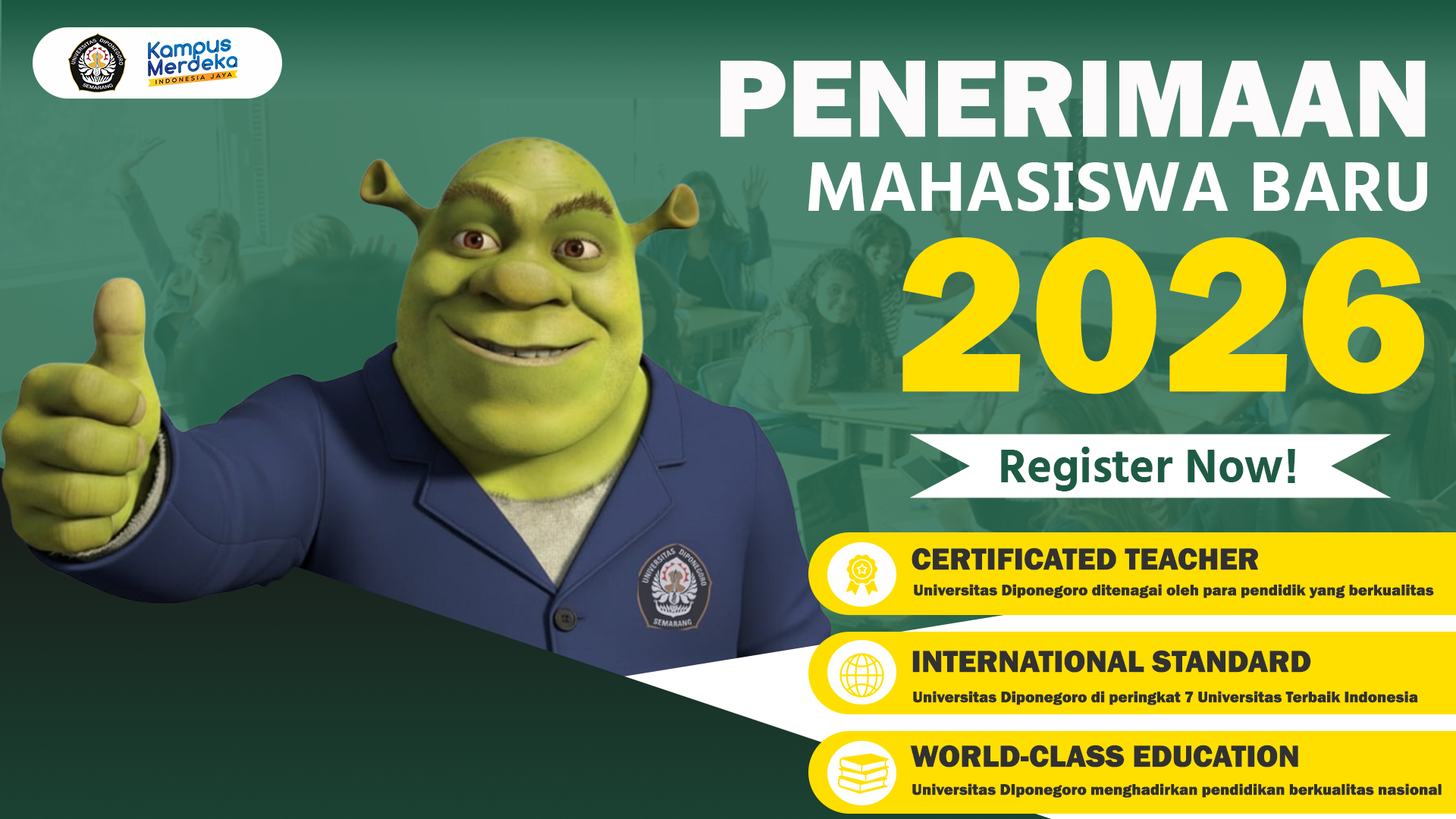
<style>
.page{position:relative;width:1456px;height:819px}
.page>*{position:absolute;margin:0}
.t1{font:113.7px "FranklinGothic-Heavy";color:#fcfafa}
.t2{font:56.9px "GenEiNuGothic-EB";color:#fefefe}
.t3{font:227.5px "FranklinGothic-Heavy";color:#ffdf00}
.t4{font:37.9px "GenEiNuGothic-EB";color:#1e5b45}
.t5{font:31.6px "FranklinGothic-Heavy";color:#323131}
.t6{font:15.8px "FranklinGothic-Heavy";color:#323131}
</style>
<div class="page">
<p class="t1" style="left:720px;top:61px;width:706px;height:76px">PENERIMAAN</p>
<p class="t2" style="left:808px;top:162px;width:619px;height:50px">MAHASISWA BARU</p>
<p class="t3" style="left:902px;top:237px;width:522px;height:157px">2026</p>
<p class="t4" style="left:1001px;top:447px;width:294px;height:44px">Register Now!</p>
<p class="t5" style="left:912px;top:548px;width:346px;height:22px">CERTIFICATED TEACHER</p>
<p class="t6" style="left:914px;top:584px;width:520px;height:14px">Universitas Diponegoro ditenagai oleh para pendidik yang berkualitas</p>
<p class="t5" style="left:912px;top:650px;width:399px;height:23px">INTERNATIONAL STANDARD</p>
<p class="t6" style="left:913px;top:691px;width:505px;height:14px">Universitas Diponegoro di peringkat 7 Universitas Terbaik Indonesia</p>
<p class="t5" style="left:910px;top:745px;width:388px;height:22px">WORLD-CLASS EDUCATION</p>
<p class="t6" style="left:912px;top:783px;width:530px;height:15px">Universitas DIponegoro menghadirkan pendidikan berkualitas nasional</p>
</div>
